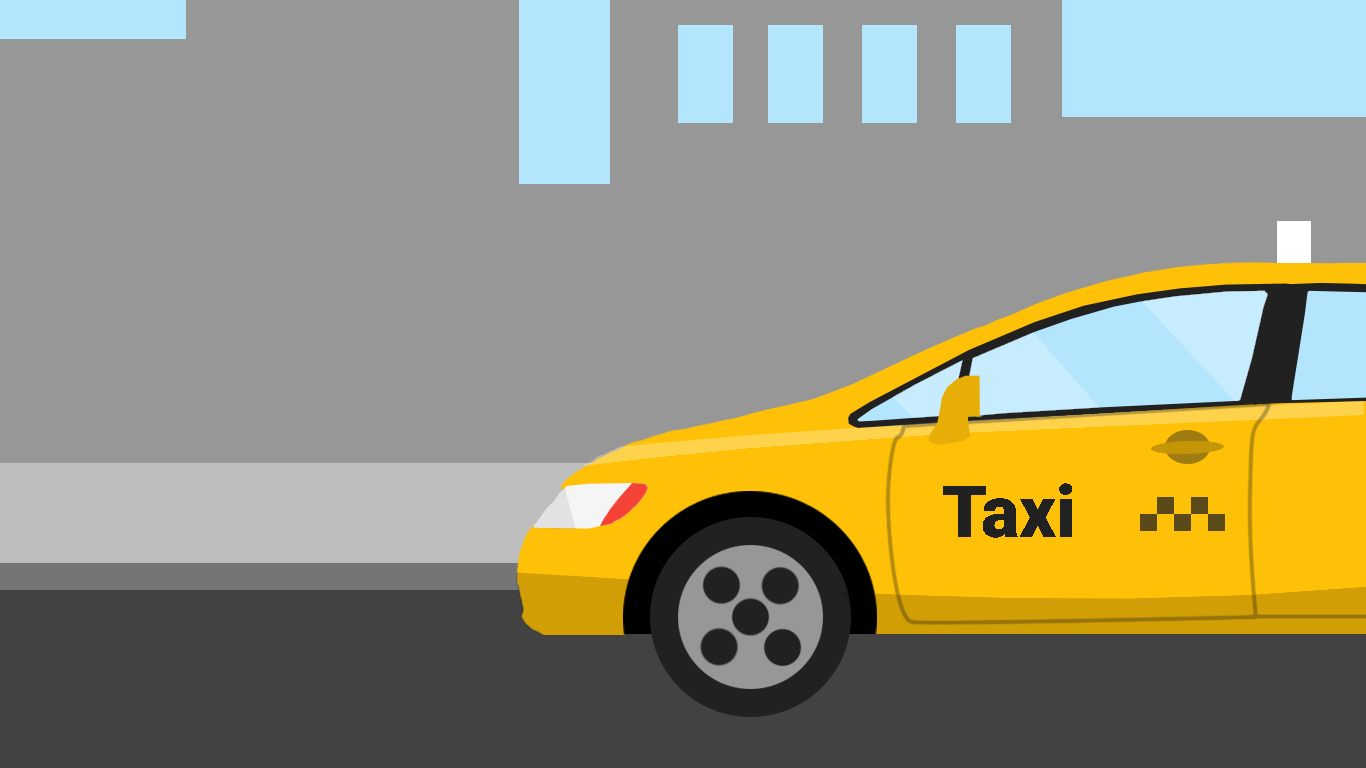
<style>
.page{position:relative;width:1366px;height:768px;background:#979797}
.page>*{position:absolute;margin:0}
.t1{font:72px "Roboto-Black";color:#212121}
</style>
<div class="page">
<p class="t1" style="left:943px;top:483px;width:129px;height:55px">Taxi</p>
</div>
